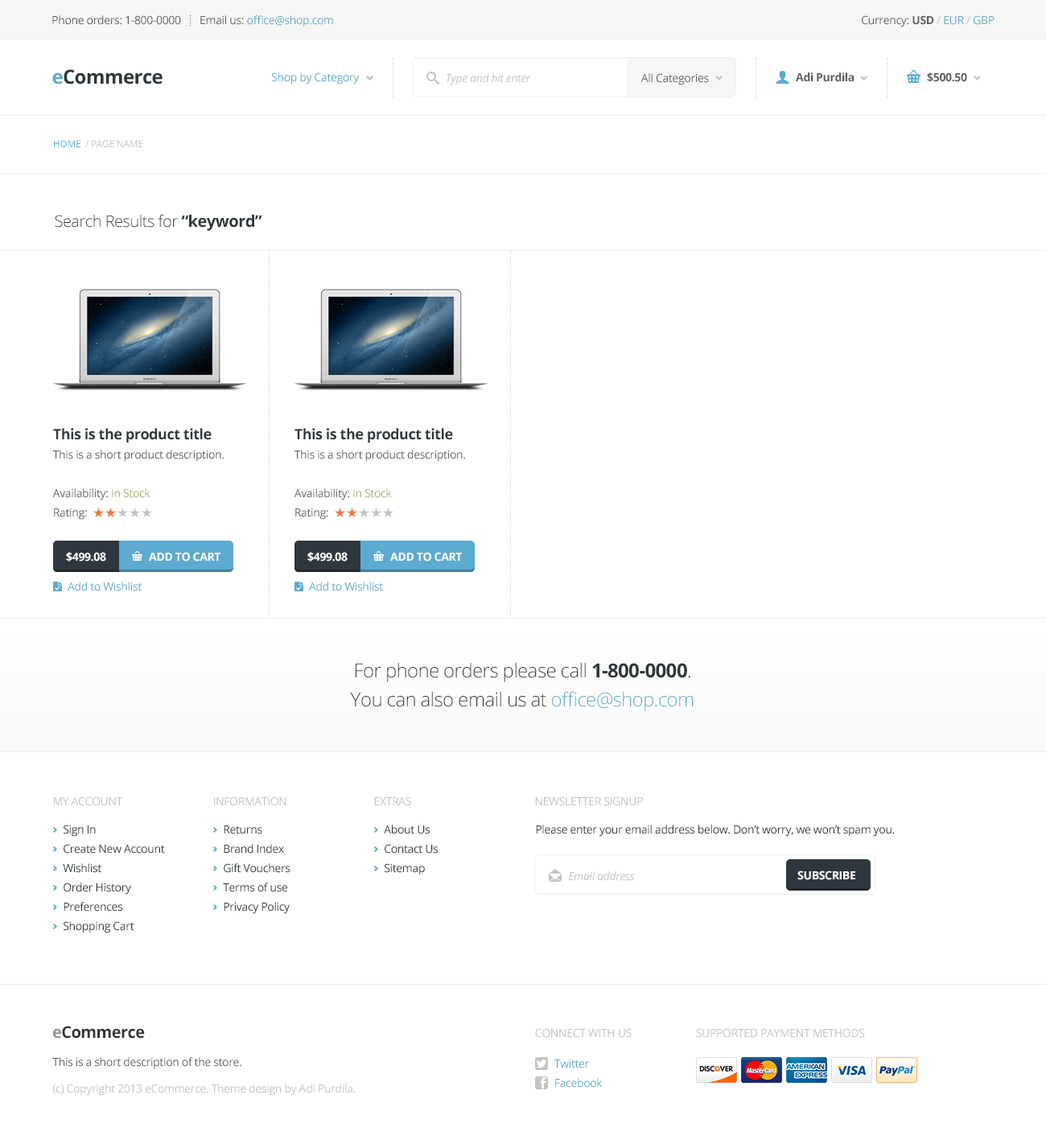
<style>
.page{position:relative;width:1046px;height:1140px;background:#ffffff}
.page>*{position:absolute;margin:0}
.t1{font:11.3px "OpenSans";letter-spacing:-0.025em;color:#5f5e5e}
.t2{font:11.3px "OpenSans-Light";color:#5f5e5e}
.t3{font:11.3px "OpenSans";letter-spacing:-0.025em;color:#5daad0}
.t4{font:11.3px "OpenSans-Bold";letter-spacing:-0.025em;color:#5f5e5e}
.t5{font:11.3px "OpenSans";letter-spacing:-0.025em;color:#c3c3c3}
.t6{font:11.4px "OpenSans-Light";color:#c3c3c3}
.t7{font:19.3px "OpenSans-Bold";letter-spacing:-0.025em;color:#2e373f}
.t8{font:19.3px "OpenSans-Bold";letter-spacing:-0.025em;color:#5daad0}
.t9{font:11.3px "OpenSans-Italic";letter-spacing:-0.025em;color:#c3c3c3}
.t10{font:9.7px "OpenSans";letter-spacing:-0.025em;color:#c3c3c3;text-transform:uppercase}
.t11{font:9.7px "OpenSans";letter-spacing:-0.025em;color:#5daad0;text-transform:uppercase}
.t12{font:16.1px "OpenSans-Light";letter-spacing:-0.025em;color:#2e373f}
.t13{font:16.1px "OpenSans-Bold";letter-spacing:-0.025em;color:#2e373f}
.t14{font:14.5px "OpenSans-Bold";letter-spacing:-0.025em;color:#2e373f}
.t15{font:11.3px/19.3px "OpenSans";letter-spacing:-0.025em;color:#5f5e5e}
.t16{font:11.3px/19.3px "OpenSans";letter-spacing:-0.025em;color:#9dbb6f}
.t17{font:11.3px "OpenSans-Bold";letter-spacing:-0.025em;color:#ffffff;text-transform:uppercase}
.t18{font:19.3px/29px "OpenSans-Light";letter-spacing:-0.025em;color:#2e373f}
.t19{font:19.3px/29px "OpenSans-Bold";letter-spacing:-0.025em;color:#2e373f}
.t20{font:19.3px/29px "OpenSans-Light";letter-spacing:-0.025em;color:#5daad0}
.t21{font:11.3px "OpenSans";letter-spacing:-0.025em;color:#c3c3c3;text-transform:uppercase}
.t22{font:11.3px/19.3px "OpenSans";letter-spacing:-0.025em;color:#2e373f}
.t23{font:11.3px "OpenSans";letter-spacing:-0.025em;color:#2e373f}
.t24{font:16.1px "OpenSans-Bold";letter-spacing:-0.025em;color:#5daad0}
</style>
<div class="page">
<p class="t1" style="left:52px;top:15px;width:129px;height:10px">Phone orders: 1-800-0000</p>
<p class="t2" style="left:190px;top:15px;width:1px;height:11px;rotate:90deg">.....</p>
<p class="t3" style="left:200px;top:15px;width:133px;height:12px"><span class="t1">Email us: </span>office@shop.com</p>
<p class="t1" style="left:862px;top:15px;width:132px;height:12px">Currency: <span class="t4">USD </span><span class="t5">/ </span><span class="t3">EUR </span><span class="t5">/ </span><span class="t3">GBP</span></p>
<p class="t6" style="left:393px;top:58px;width:0px;height:39px;rotate:90deg">.................</p>
<p class="t6" style="left:755px;top:58px;width:1px;height:39px;rotate:90deg">.................</p>
<p class="t6" style="left:887px;top:58px;width:0px;height:39px;rotate:90deg">.................</p>
<p class="t7" style="left:52px;top:69px;width:111px;height:15px"><span class="t8">e</span>Commerce</p>
<p class="t3" style="left:271px;top:72px;width:89px;height:12px">Shop by Category</p>
<p class="t9" style="left:447px;top:73px;width:84px;height:12px">Type and hit enter</p>
<p class="t1" style="left:640px;top:73px;width:69px;height:12px">All Categories</p>
<p class="t4" style="left:796px;top:72px;width:58px;height:10px">Adi Purdila</p>
<p class="t4" style="left:927px;top:72px;width:40px;height:10px">$500.50</p>
<p class="t10" style="left:54px;top:140px;width:89px;height:7px"><span class="t11">Home</span>  / Page Name</p>
<p class="t12" style="left:55px;top:214px;width:207px;height:17px">Search Results for <span class="t13">“keyword”</span></p>
<p class="t6" style="left:269px;top:251px;width:1px;height:365px;rotate:90deg">........................................................................................................................................................</p>
<p class="t6" style="left:510px;top:251px;width:1px;height:365px;rotate:90deg">........................................................................................................................................................</p>
<p class="t14" style="left:53px;top:428px;width:159px;height:15px">This is the product title</p>
<p class="t14" style="left:294px;top:428px;width:159px;height:15px">This is the product title</p>
<p class="t15" style="left:52px;top:450px;width:172px;height:70px">This is a short product description.<br><br>Availability: <span class="t16">In Stock<br></span>Rating:</p>
<p class="t15" style="left:294px;top:450px;width:171px;height:70px">This is a short product description.<br><br>Availability: <span class="t16">In Stock<br></span>Rating:</p>
<p class="t17" style="left:66px;top:552px;width:40px;height:10px">$499.08</p>
<p class="t17" style="left:149px;top:552px;width:71px;height:10px">Add to cart</p>
<p class="t17" style="left:307px;top:552px;width:41px;height:10px">$499.08</p>
<p class="t17" style="left:390px;top:552px;width:72px;height:10px">Add to cart</p>
<p class="t3" style="left:68px;top:582px;width:74px;height:9px">Add to Wishlist</p>
<p class="t3" style="left:309px;top:582px;width:74px;height:9px">Add to Wishlist</p>
<p class="t18" style="left:350px;top:662px;width:344px;height:49px;text-align:center">For phone orders please call <span class="t19">1-800-0000</span>. You can also email us at <span class="t20">office@shop.com</span></p>
<p class="t21" style="left:54px;top:797px;width:68px;height:9px">My Account</p>
<p class="t21" style="left:214px;top:797px;width:72px;height:9px">Information</p>
<p class="t21" style="left:374px;top:797px;width:37px;height:9px">Extras</p>
<p class="t21" style="left:535px;top:797px;width:108px;height:9px">Newsletter Signup</p>
<p class="t22" style="left:63px;top:825px;width:102px;height:108px">Sign In<br>Create New Account<br>Wishlist<br>Order History<br>Preferences<br>Shopping Cart</p>
<p class="t22" style="left:223px;top:825px;width:67px;height:89px">Returns<br>Brand Index<br>Gift Vouchers<br>Terms of use<br>Privacy Policy</p>
<p class="t22" style="left:384px;top:825px;width:54px;height:50px">About Us<br>Contact Us<br>Sitemap</p>
<p class="t23" style="left:536px;top:825px;width:359px;height:12px">Please enter your email address below. Don’t worry, we won’t spam you.</p>
<p class="t9" style="left:568px;top:871px;width:67px;height:10px">Email address</p>
<p class="t17" style="left:797px;top:871px;width:58px;height:9px">Subscribe</p>
<p class="t13" style="left:53px;top:1026px;width:92px;height:13px"><span class="t24">e</span>Commerce</p>
<p class="t21" style="left:535px;top:1028px;width:97px;height:10px">Connect with us</p>
<p class="t21" style="left:696px;top:1028px;width:169px;height:10px">Supported payment methods</p>
<p class="t5" style="left:52px;top:1057px;width:304px;height:39px"><span class="t1">This is a short description of the store.<br><br></span>(c) Copyright 2013 eCommerce. Theme design by Adi Purdila.</p>
<p class="t3" style="left:554px;top:1059px;width:35px;height:9px">Twitter</p>
<p class="t3" style="left:555px;top:1078px;width:48px;height:10px">Facebook</p>
</div>
